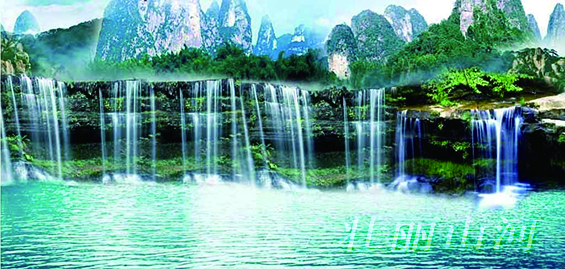
<style>
.page{position:relative;width:565px;height:269px}
.page>*{position:absolute;margin:0}
.t1{font:38.9px "SimSun";font-weight:bold;font-style:italic;scale:1.29 1}
</style>
<div class="page">
<p class="t1" style="left:337px;top:215px;width:206px;height:37px">壮丽山河</p>
</div>
